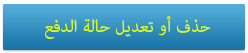
<style>
.page{position:relative;width:248px;height:53px}
.page>*{position:absolute;margin:0}
.t1{font:24px "AdobeArabic-Regular";color:#dafa05}
</style>
<div class="page">
<p class="t1" style="left:45px;top:16px;width:166px;height:23px">حذف أو تعديل حالة الدفع</p>
</div>
